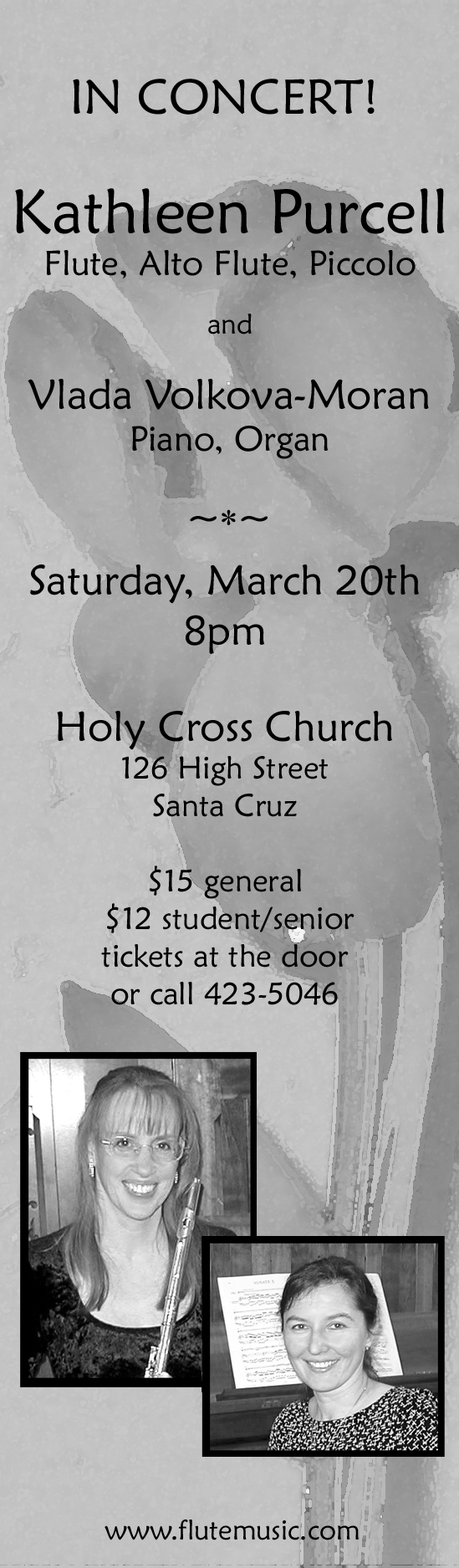
<style>
.page{position:relative;width:459px;height:1568px}
.page>*{position:absolute;margin:0}
.t1{font:48.8px "MaiandraGD-Regular";color:#000000}
.t2{font:34.8px "MaiandraGD-Regular";color:#000000}
.t3{font:62.7px "MaiandraGD-Regular";color:#000000}
.t4{font:27.9px "MaiandraGD-Regular";color:#000000}
.t5{font:41.8px "MaiandraGD-Regular";color:#000000}
.t6{font:38.3px "MaiandraGD-Regular";color:#000000}
.t7{font:38.3px "SymbolMT";color:#000000}
.t8{font:31.4px "MaiandraGD-Regular";color:#000000}
</style>
<div class="page">
<p class="t1" style="left:73px;top:79px;width:302px;height:36px">IN CONCERT!</p>
<p class="t2" style="left:15px;top:188px;width:430px;height:271px;text-align:center"><span class="t3">Kathleen Purcell<br></span>Flute, Alto Flute, Piccolo<br><br><span class="t4">and<br><br></span><span class="t5">Vlada Volkova-Moran<br></span>Piano, Organ</p>
<p class="t6" style="left:190px;top:509px;width:78px;height:16px">~<span class="t7">*</span>~</p>
<p class="t8" style="left:30px;top:564px;width:389px;height:441px;text-align:center"><span class="t5">Saturday, March 20th 8pm<br><br>Holy Cross Church<br></span>126 High Street<br>Santa Cruz<br><br>$15 general<br> $12 student/senior<br>tickets at the door<br>or call 423-5046</p>
<p class="t4" style="left:105px;top:1519px;width:254px;height:21px">www.flutemusic.com</p>
</div>
